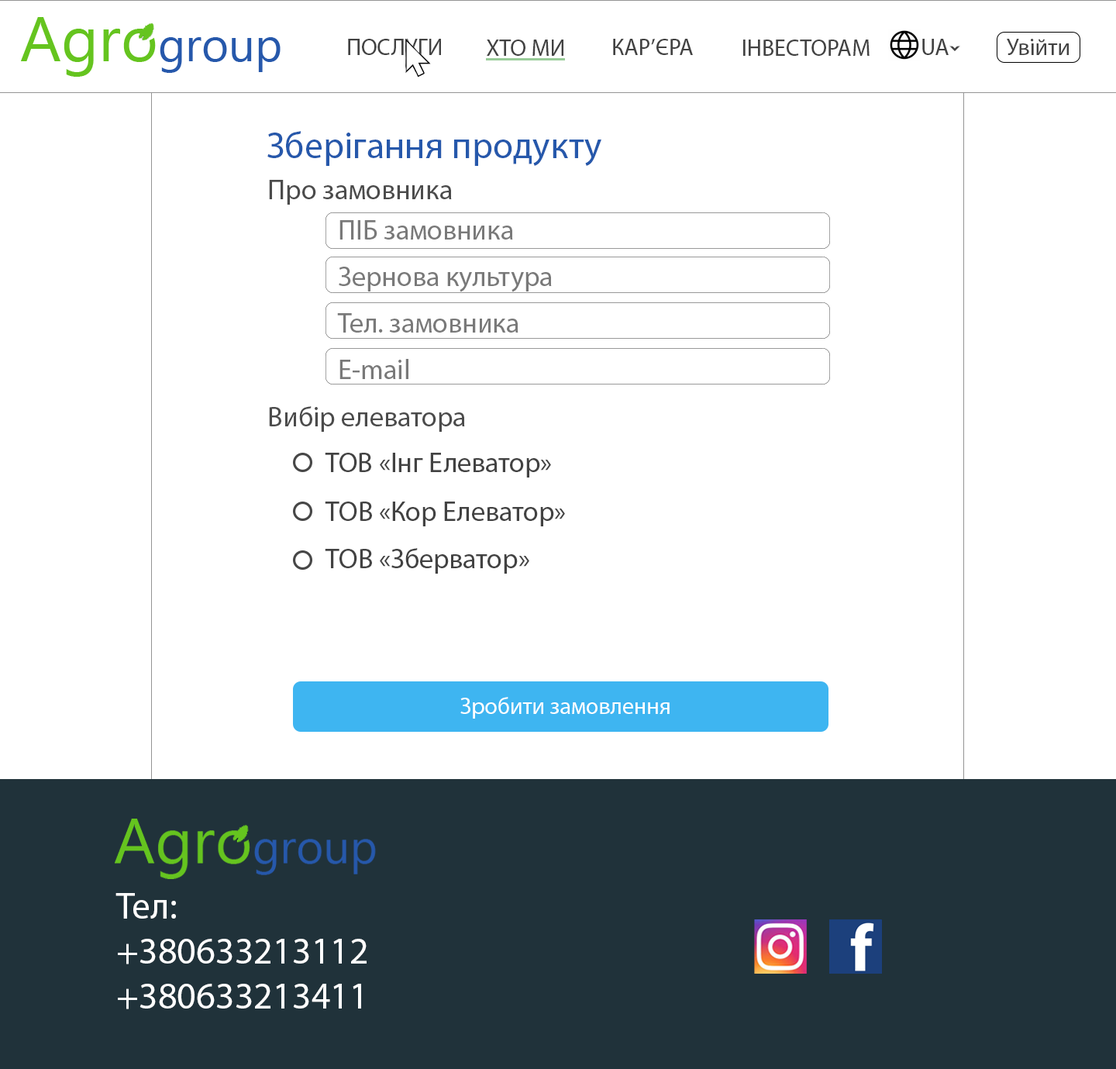
<style>
.page{position:relative;width:1116px;height:1069px;background:#ffffff}
.page>*{position:absolute;margin:0}
.t1{font:23.2px "MyriadPro-Regular";color:#424242}
.t2{font:37.2px "MyriadPro-Regular";color:#2658ab}
.t3{font:27.9px "MyriadPro-Regular";color:#4b4b4b}
.t4{font:27.9px/46.5px "MyriadPro-Regular";color:#797979}
.t5{font:27.9px "MyriadPro-Regular";color:#424242}
.t6{font:23.2px "MyriadPro-Regular";color:#ffffff}
.t7{font:37.4px "MyriadPro-Regular";color:#ffffff}
</style>
<div class="page">
<p class="t1" style="left:348px;top:39px;width:93px;height:16px">ПОСЛУГИ</p>
<p class="t1" style="left:487px;top:40px;width:76px;height:16px">ХТО МИ</p>
<p class="t1" style="left:613px;top:39px;width:80px;height:16px">КАР’ЄРА</p>
<p class="t1" style="left:743px;top:40px;width:126px;height:16px">ІНВЕСТОРАМ</p>
<p class="t1" style="left:922px;top:39px;width:26px;height:16px">UA</p>
<p class="t1" style="left:1007px;top:39px;width:62px;height:16px">Увійти</p>
<p class="t2" style="left:267px;top:131px;width:334px;height:35px">Зберігання продукту</p>
<p class="t3" style="left:269px;top:180px;width:183px;height:25px">Про замовника</p>
<p class="t4" style="left:337px;top:220px;width:215px;height:159px">ПІБ замовника<br>Зернова культура<br>Тел. замовника<br>E-mail</p>
<p class="t3" style="left:269px;top:406px;width:196px;height:26px">Вибір елеватора</p>
<p class="t5" style="left:325px;top:453px;width:226px;height:24px">ТОВ «Інг Елеватор»</p>
<p class="t5" style="left:325px;top:501px;width:240px;height:25px">ТОВ «Кор Елеватор»</p>
<p class="t5" style="left:325px;top:548px;width:204px;height:25px">ТОВ «Зберватор»</p>
<p class="t6" style="left:460px;top:697px;width:210px;height:21px">Зробити замовлення</p>
<p class="t7" style="left:115px;top:893px;width:252px;height:116px">Тел:<br>+380633213112<br>+380633213411</p>
</div>
